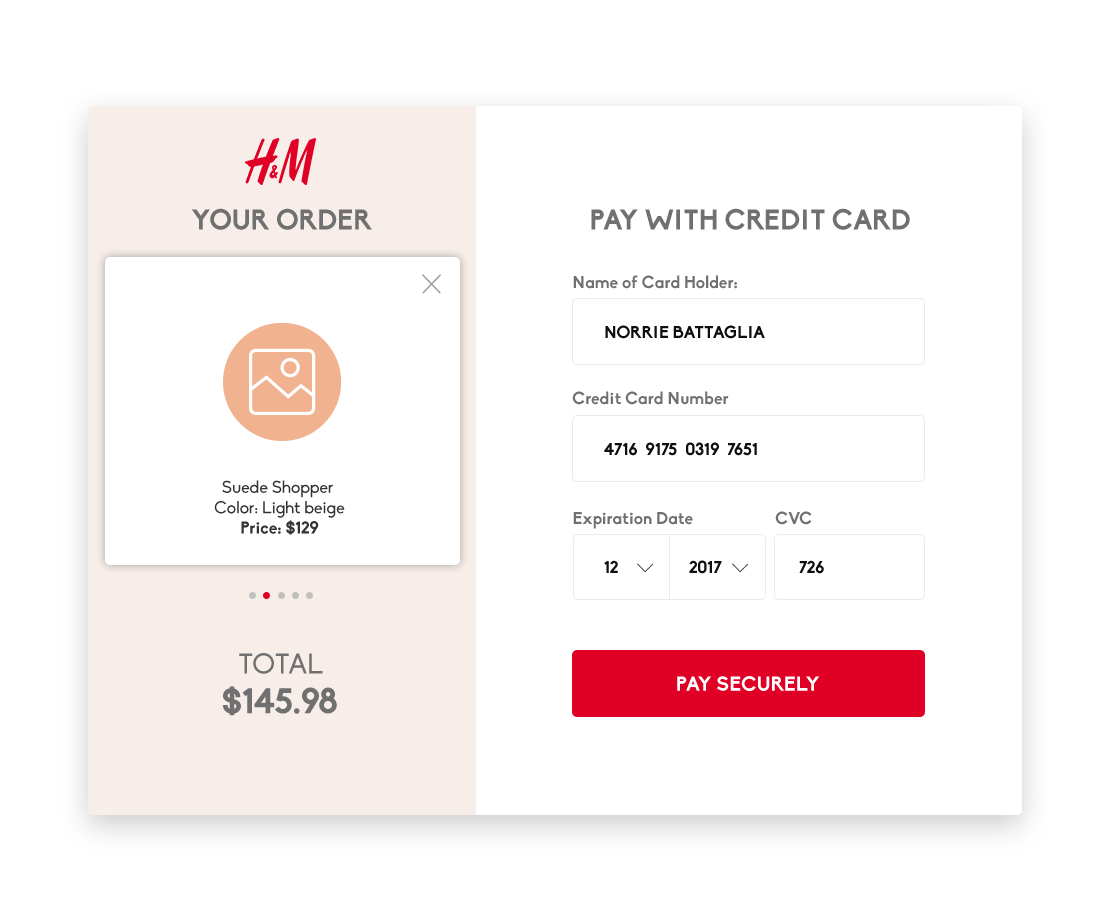
<style>
.page{position:relative;width:1116px;height:908px;background:#ffffff}
.page>*{position:absolute;margin:0}
.t1{font:28.1px "Biko-Bold";color:#707070;text-transform:uppercase}
.t2{font:17px "Biko-Bold";color:#707070}
.t3{font:17px "Biko-Bold";color:#0f0f0f;text-transform:uppercase}
.t4{font:17px "Biko";color:#333333}
.t5{font:17px "Biko-Bold";color:#333333}
.t6{font:28.1px "Biko";color:#707070;text-transform:uppercase}
.t7{font:20.2px "Biko-Bold";color:#ffffff;text-transform:uppercase}
.t8{font:35.2px "Biko-Bold";color:#707070}
</style>
<div class="page">
<p class="t1" style="left:191px;top:208px;width:181px;height:22px">your order</p>
<p class="t1" style="left:591px;top:208px;width:319px;height:22px">Pay with Credit card</p>
<p class="t2" style="left:573px;top:275px;width:164px;height:14px">Name of Card Holder:</p>
<p class="t3" style="left:605px;top:325px;width:160px;height:14px">Norrie Battaglia</p>
<p class="t2" style="left:572px;top:391px;width:157px;height:14px">Credit Card Number</p>
<p class="t3" style="left:604px;top:442px;width:153px;height:14px">4716  9175  0319  7651</p>
<p class="t4" style="left:214px;top:480px;width:131px;height:55px;text-align:center">Suede Shopper <br>Color: Light beige<br><span class="t5">Price: $129</span></p>
<p class="t2" style="left:573px;top:512px;width:120px;height:17px">Expiration Date</p>
<p class="t2" style="left:775px;top:511px;width:37px;height:14px">CVC</p>
<p class="t3" style="left:604px;top:560px;width:14px;height:13px">12</p>
<p class="t3" style="left:689px;top:560px;width:33px;height:14px">2017</p>
<p class="t3" style="left:799px;top:560px;width:25px;height:14px">726</p>
<p class="t6" style="left:239px;top:653px;width:84px;height:21px">Total</p>
<p class="t7" style="left:677px;top:676px;width:143px;height:15px">Pay securely</p>
<p class="t8" style="left:223px;top:686px;width:114px;height:30px">$145.98</p>
</div>
